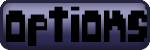
<style>
.page{position:relative;width:150px;height:50px;background:#000000}
.page>*{position:absolute;margin:0}
.t1{font:62.9px "Gabs-Pixel";color:#000000;scale:0.69 1}
</style>
<div class="page">
<p class="t1" style="left:6px;top:6px;width:141px;height:40px">Options</p>
</div>
